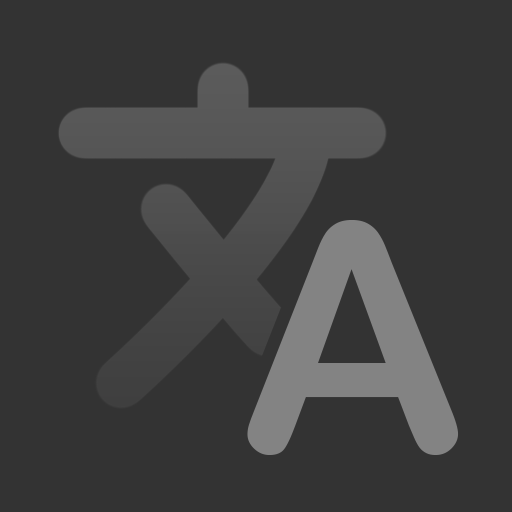
<style>
.page{position:relative;width:512px;height:512px;background:#333333}
.page>*{position:absolute;margin:0}
.t1{font:317.3px "ArialRoundedMTBold";letter-spacing:0.012em;color:#838383}
</style>
<div class="page">
<p class="t1" style="left:247px;top:220px;width:212px;height:235px">A</p>
</div>
